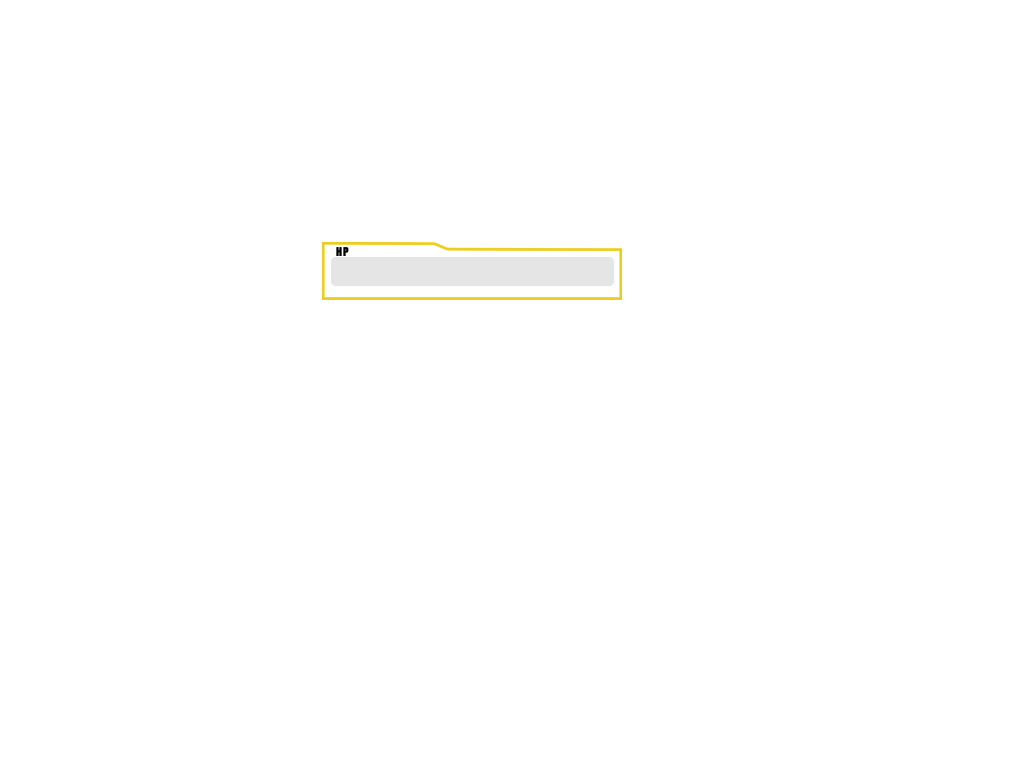
<style>
.page{position:relative;width:1024px;height:768px;background:#ffffff}
.page>*{position:absolute;margin:0}
.t1{font:11px "Impact";letter-spacing:0.075em;color:#000000}
</style>
<div class="page">
<p class="t1" style="left:336px;top:247px;width:13px;height:9px">HP</p>
</div>
